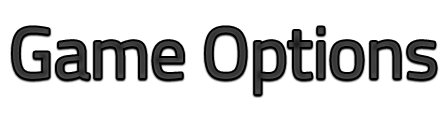
<style>
.page{position:relative;width:448px;height:125px;background:#ffffff}
.page>*{position:absolute;margin:0}
.t1{font:72px "TitilliumWeb-Regular";color:#3d3d3d}
</style>
<div class="page">
<p class="t1" style="left:13px;top:27px;width:423px;height:67px">Game Options</p>
</div>
